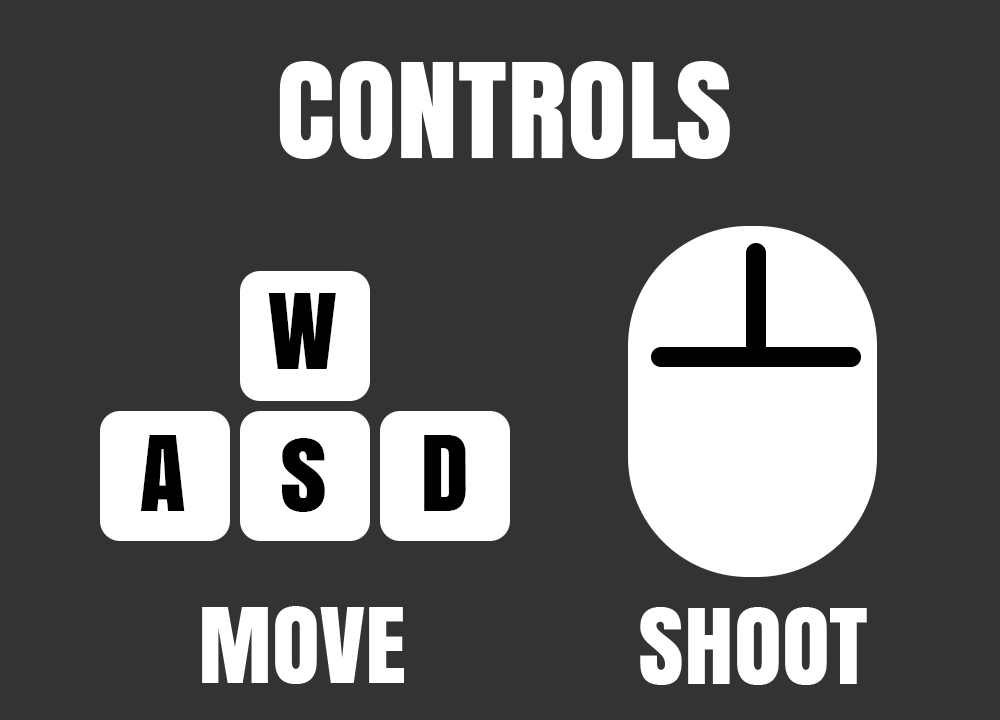
<style>
.page{position:relative;width:1000px;height:720px;background:#333333}
.page>*{position:absolute;margin:0}
.t1{font:123.1px "Anton";color:#ffffff}
.t2{font:98.5px "Anton";color:#000000}
.t3{font:98.5px "Anton";color:#ffffff}
</style>
<div class="page">
<p class="t1" style="left:279px;top:61px;width:451px;height:98px">CONTROLS</p>
<p class="t2" style="left:268px;top:293px;width:68px;height:76px">W</p>
<p class="t2" style="left:140px;top:435px;width:45px;height:76px">A</p>
<p class="t2" style="left:282px;top:438px;width:43px;height:74px">s</p>
<p class="t2" style="left:424px;top:435px;width:42px;height:76px">D</p>
<p class="t3" style="left:202px;top:606px;width:202px;height:78px">MOVE</p>
<p class="t3" style="left:640px;top:607px;width:227px;height:78px">SHOOT</p>
</div>
